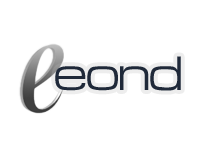
<style>
.page{position:relative;width:200px;height:150px;background:#ffffff}
.page>*{position:absolute;margin:0}
.t1{font:50px "EurostileExtended-Roman";letter-spacing:-0.1em;color:#1f2939}
</style>
<div class="page">
<p class="t1" style="left:55px;top:56px;width:126px;height:35px">eond</p>
</div>
